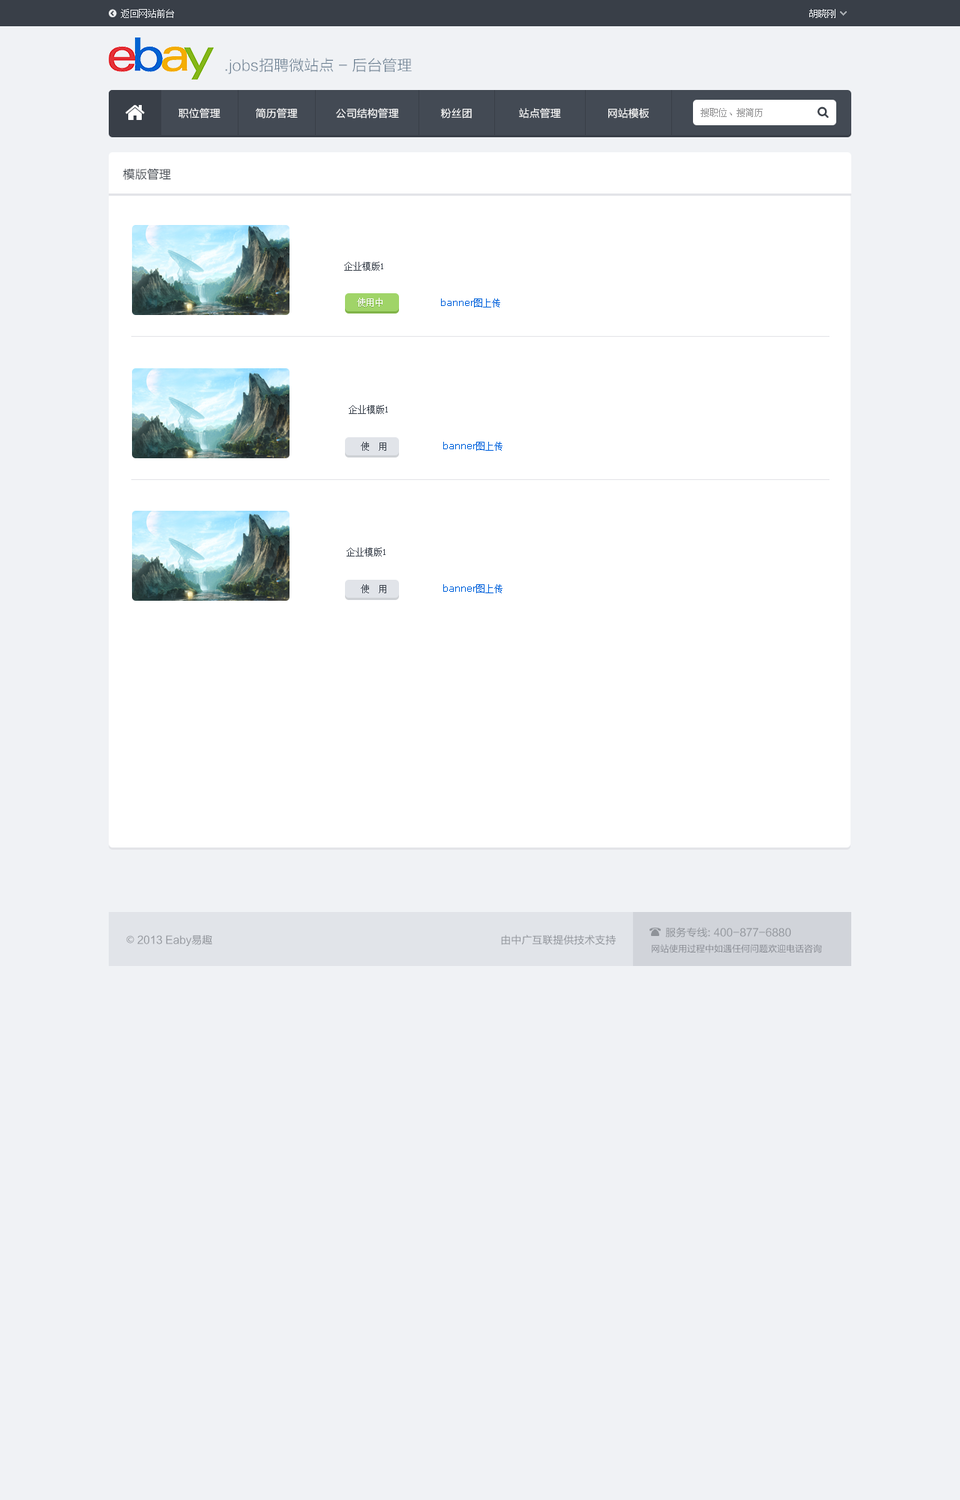
<style>
.page{position:relative;width:960px;height:1500px;background:#f0f2f5}
.page>*{position:absolute;margin:0}
.t1{font:9px "SimSun";color:#eceef0}
.t2{font:15px "FZLTXHK";color:#6c8092}
.t3{font:10.5px "FZLTXHK";color:#ffffff}
.t4{font:9px "SimSun";color:#959596}
.t5{font:12px "FZLTXHK";color:#393f48}
.t6{font:9px "SimSun";color:#434a54}
.t7{font:9px "SimSun";color:#ffffff}
.t8{font:9px "Verdana";color:#0063dc}
.t9{font:9px "SimSun";color:#0063dc}
.t10{font:10.5px "FZLTHK--GBK1-0";color:#8f9399}
.t11{font:10.5px "AdobeHeitiStd-Regular";color:#8f9399}
.t12{font:9px "FZLTHJW--GB1-0";color:#868990}
</style>
<div class="page">
<p class="t1" style="left:121px;top:9px;width:53px;height:9px">返回网站前台</p>
<p class="t1" style="left:809px;top:9px;width:27px;height:9px">胡晓刚</p>
<p class="t2" style="left:225px;top:58px;width:187px;height:16px">.jobs招聘微站点 - 后台管理</p>
<p class="t3" style="left:178px;top:108px;width:42px;height:10px">职位管理</p>
<p class="t3" style="left:256px;top:108px;width:42px;height:10px">简历管理</p>
<p class="t3" style="left:336px;top:108px;width:63px;height:10px">公司结构管理</p>
<p class="t3" style="left:441px;top:108px;width:31px;height:10px">粉丝团</p>
<p class="t3" style="left:519px;top:108px;width:42px;height:10px">站点管理</p>
<p class="t3" style="left:608px;top:108px;width:41px;height:10px">网站模板</p>
<p class="t4" style="left:700px;top:108px;width:63px;height:9px">搜职位、搜简历</p>
<p class="t5" style="left:123px;top:168px;width:48px;height:12px">模版管理</p>
<p class="t6" style="left:344px;top:262px;width:39px;height:9px">企业模版1</p>
<p class="t7" style="left:357px;top:298px;width:25px;height:9px">使用中</p>
<p class="t8" style="left:441px;top:298px;width:59px;height:10px">banner<span class="t9">图上传</span></p>
<p class="t6" style="left:349px;top:405px;width:39px;height:9px">企业模版1</p>
<p class="t6" style="left:361px;top:442px;width:25px;height:9px">使  用</p>
<p class="t8" style="left:443px;top:442px;width:59px;height:9px">banner<span class="t9">图上传</span></p>
<p class="t6" style="left:346px;top:548px;width:40px;height:8px">企业模版1</p>
<p class="t6" style="left:361px;top:584px;width:25px;height:9px">使  用</p>
<p class="t8" style="left:443px;top:584px;width:59px;height:9px">banner<span class="t9">图上传</span></p>
<p class="t10" style="left:665px;top:927px;width:126px;height:11px">服务专线: 400-877-6880</p>
<p class="t10" style="left:126px;top:934px;width:86px;height:12px"><span class="t11">©</span> 2013 Eaby易趣</p>
<p class="t10" style="left:501px;top:934px;width:115px;height:11px">由中广互联提供技术支持</p>
<p class="t12" style="left:652px;top:944px;width:170px;height:9px">网站使用过程中如遇任何问题欢迎电话咨询</p>
</div>
